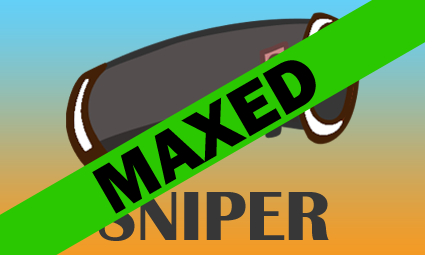
<style>
.page{position:relative;width:425px;height:255px}
.page>*{position:absolute;margin:0}
.t1{font:72px "FranklinGothic-Heavy";color:#000000}
.t2{font:72px "BritannicBold";color:#373737}
</style>
<div class="page">
<p class="t1" style="left:92px;top:60px;width:224px;height:154px;rotate:-30deg">MAXED</p>
<p class="t2" style="left:98px;top:191px;width:231px;height:50px">SNIPER</p>
</div>
